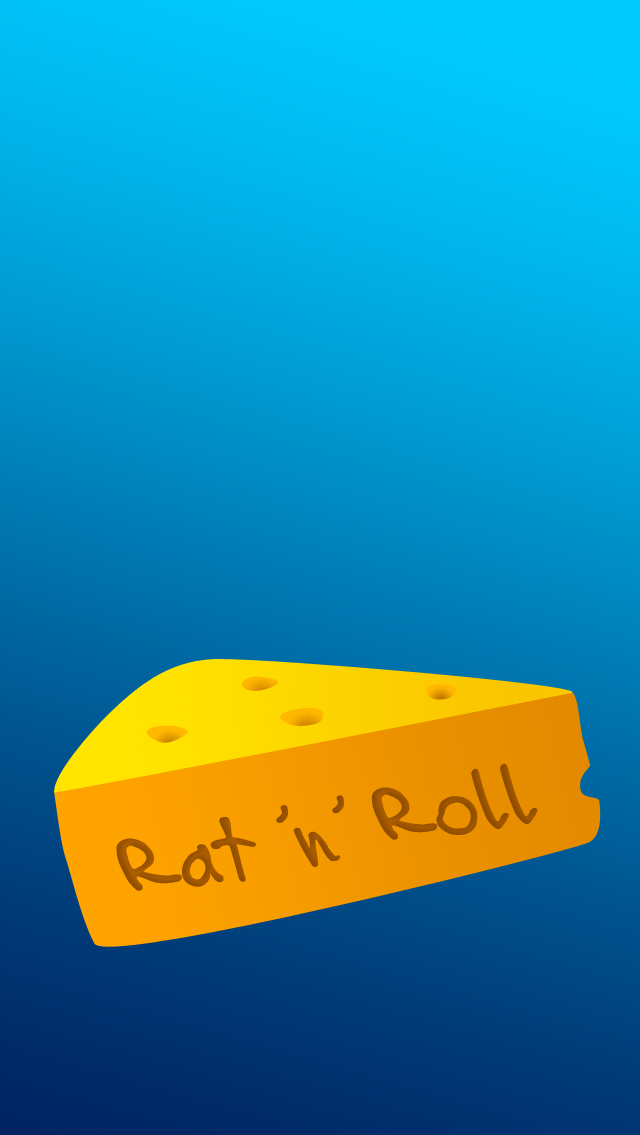
<style>
.page{position:relative;width:640px;height:1135px}
.page>*{position:absolute;margin:0}
.t1{font:80.7px "rat";color:#a75800}
</style>
<div class="page">
<p class="t1" style="left:371px;top:763px;width:167px;height:77px;rotate:-10deg;opacity:0.92">Roll</p>
<p class="t1" style="left:276px;top:795px;width:68px;height:72px;rotate:-10deg;opacity:0.92">‘n’</p>
<p class="t1" style="left:116px;top:817px;width:140px;height:74px;rotate:-10deg;opacity:0.92">Rat</p>
</div>
